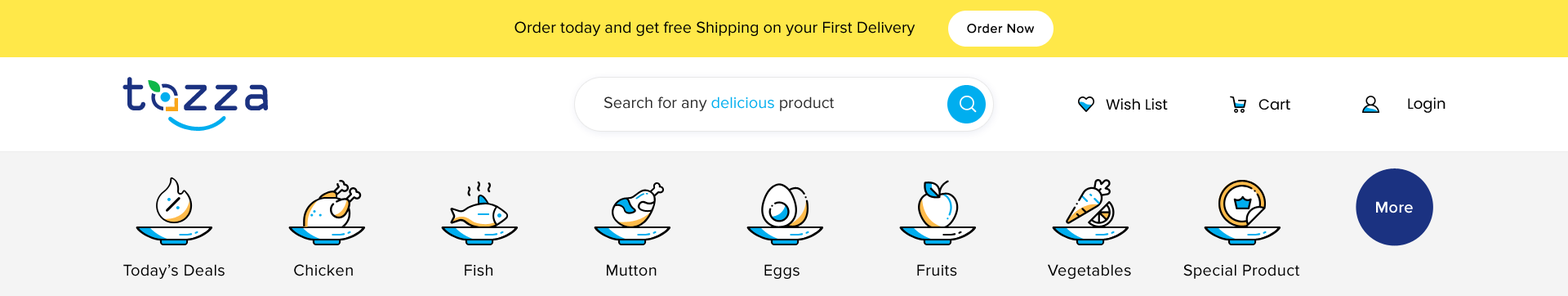
<style>
.page{position:relative;width:1568px;height:296px;background:#f4f4f4}
.page>*{position:absolute;margin:0}
.t1{font:16.3px "ProximaNova-Regular";color:#000000}
.t2{font:13.1px "ProximaNova-Regular";letter-spacing:0.04em;color:#000000}
.t3{font:54.3px "OCRAExtended";letter-spacing:-0.04em;color:#1b3281}
.t4{font:16.3px "ProximaNova-Regular";color:#2b2b2b}
.t5{font:16.3px "ProximaNova-Regular";color:#00aeef}
.t6{font:14.7px "Poppins-Regular";color:#000000}
.t7{font:16.3px "ProximaNova-Semibold";letter-spacing:0.01em;color:#ffffff}
.t8{font:16.3px "ProximaNova-Regular";letter-spacing:0.02em;color:#000000}
</style>
<div class="page">
<p class="t1" style="left:514px;top:21px;width:401px;height:15px">Order today and get free Shipping on your First Delivery</p>
<p class="t2" style="left:967px;top:24px;width:68px;height:9px">Order Now</p>
<p class="t3" style="left:122px;top:77px;width:146px;height:33px">t zza</p>
<p class="t4" style="left:604px;top:96px;width:231px;height:15px">Search for any <span class="t5">delicious</span> product</p>
<p class="t6" style="left:1106px;top:98px;width:62px;height:12px">Wish List</p>
<p class="t6" style="left:1258px;top:99px;width:32px;height:11px">Cart</p>
<p class="t6" style="left:1408px;top:97px;width:38px;height:16px">Login</p>
<p class="t7" style="left:1376px;top:201px;width:37px;height:12px">More</p>
<p class="t8" style="left:123px;top:264px;width:102px;height:14px">Today’s Deals</p>
<p class="t8" style="left:294px;top:264px;width:59px;height:12px">Chicken</p>
<p class="t8" style="left:465px;top:264px;width:27px;height:12px">Fish</p>
<p class="t8" style="left:607px;top:264px;width:50px;height:12px">Mutton</p>
<p class="t8" style="left:764px;top:264px;width:36px;height:14px">Eggs</p>
<p class="t8" style="left:917px;top:264px;width:40px;height:12px">Fruits</p>
<p class="t8" style="left:1048px;top:264px;width:83px;height:14px">Vegetables</p>
<p class="t8" style="left:1183px;top:264px;width:117px;height:14px">Special Product</p>
</div>
